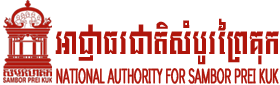
<style>
.page{position:relative;width:280px;height:85px;background:#ffffff}
.page>*{position:absolute;margin:0}
.t1{font:21px/28.3px "Kh-Writehand-Jrung";letter-spacing:-0.025em;color:#af150b;text-transform:uppercase;font-weight:bold;scale:0.54 1}
.t2{font:30px/28.3px "KhMPSJrung";color:#af150b;scale:0.77 1}
</style>
<div class="page">
<p class="t1" style="left:55px;top:18px;width:224px;height:66px;text-align:center"><span class="t2">អាជ្ញាធរជាតិសំបូរព្រៃគុក <br></span>National Authority For Sambor Prei Kuk</p>
</div>
